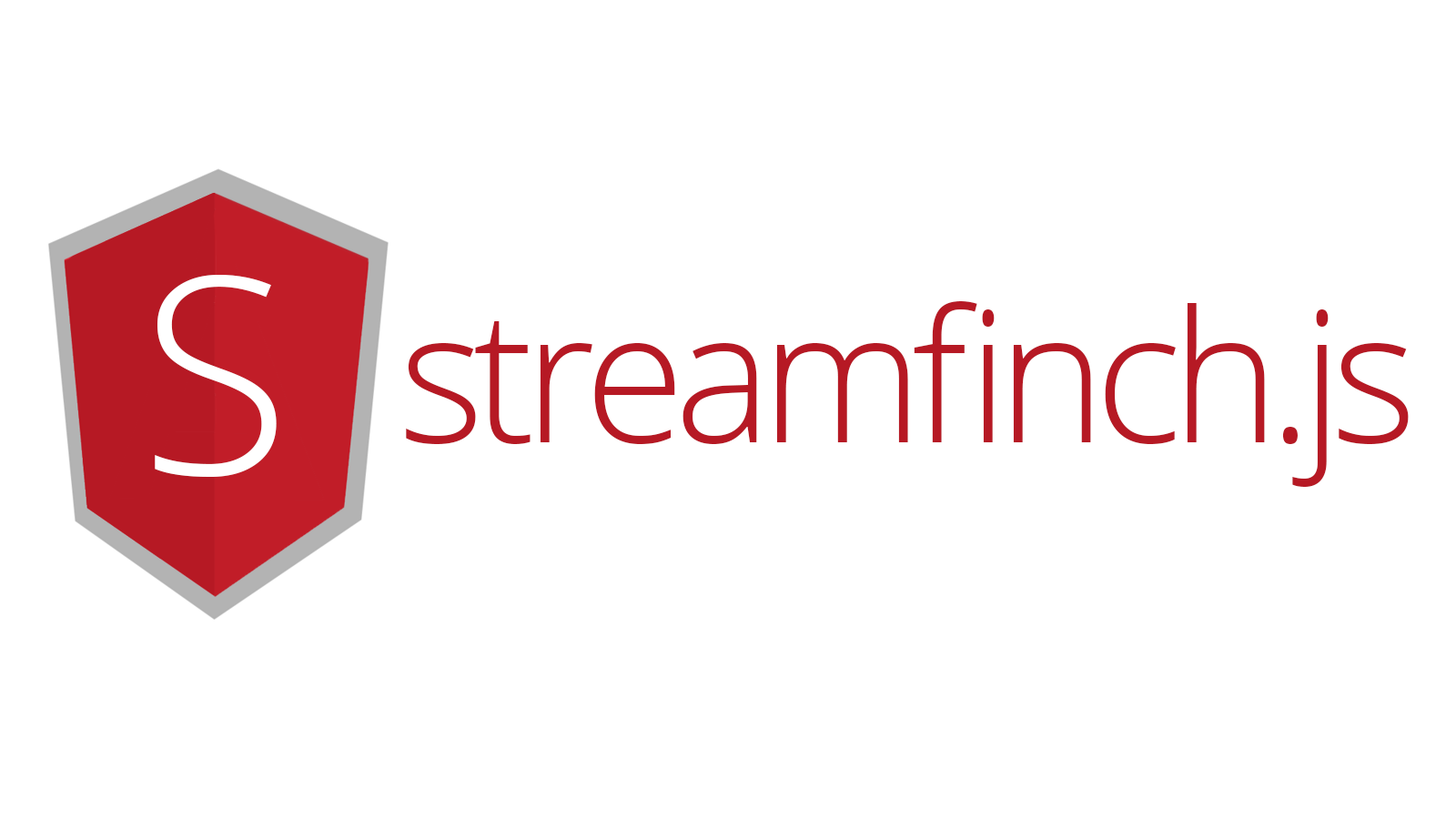
<style>
.page{position:relative;width:1456px;height:819px;background:#ffffff}
.page>*{position:absolute;margin:0}
.t1{font:274.8px "OpenSans-Light";letter-spacing:-0.06em;color:#ffffff}
.t2{font:183.8px "OpenSans-Light";letter-spacing:-0.06em;color:#b61924}
</style>
<div class="page">
<p class="t1" style="left:155px;top:275px;width:122px;height:202px">S</p>
<p class="t2" style="left:406px;top:301px;width:1003px;height:186px">streamfinch.js</p>
</div>
